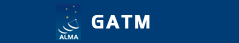
<style>
.page{position:relative;width:239px;height:43px;background:#003d77}
.page>*{position:absolute;margin:0}
.t1{font:20px "HandelGothic";letter-spacing:0.1em;color:#ffffff;font-weight:bold;scale:0.9 1}
</style>
<div class="page">
<p class="t1" style="left:91px;top:15px;width:59px;height:14px">GATM</p>
</div>
